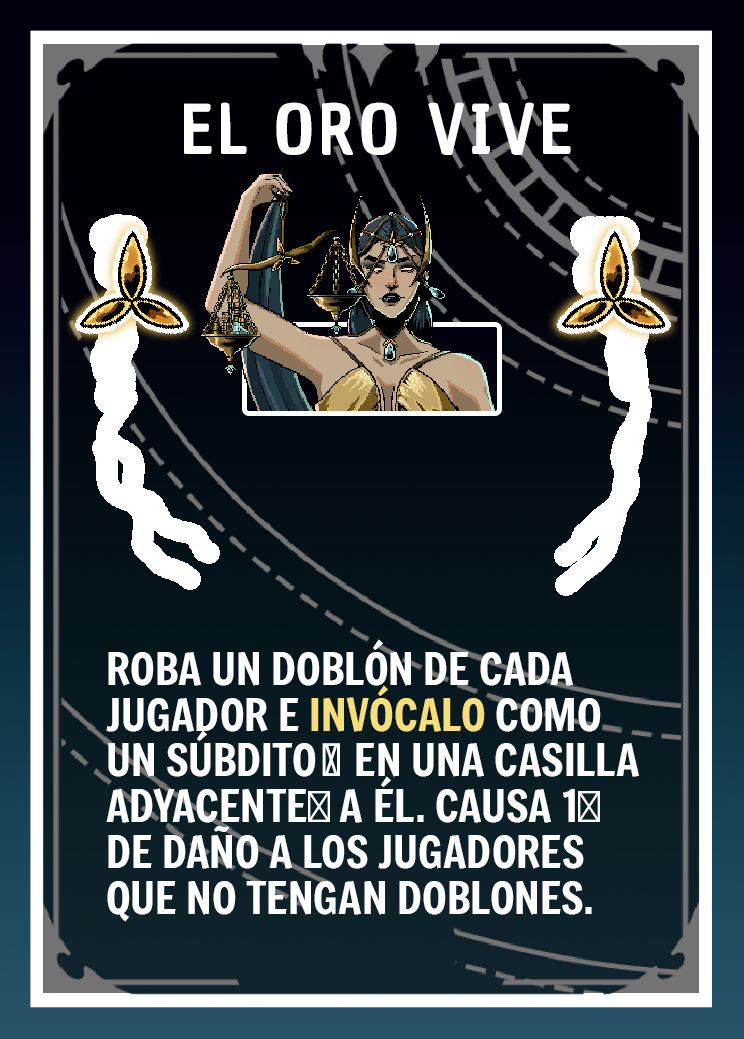
<style>
.page{position:relative;width:744px;height:1039px}
.page>*{position:absolute;margin:0}
.t1{font:66.7px "ChauPhilomeneOne-Regular";letter-spacing:0.075em;color:#ffffff}
.t2{font:43.7px/45.8px "Freeman-Regular";color:#ffffff}
.t3{font:43.7px/45.8px "Freeman-Regular";color:#f7de79}
.t4{font:43.7px/45.8px "MyriadPro-Regular";color:#ffffff}
</style>
<div class="page">
<p class="t1" style="left:184px;top:102px;width:387px;height:53px">EL ORO VIVE</p>
<p class="t2" style="left:106px;top:639px;width:533px;height:283px">ROBA UN DOBLÓN DE CADA JUGADOR E <span class="t3">INVÓCALO</span> COMO     UN SÚBDITO👾 EN UNA CASILLA ADYACENTE<span class="t4">⬆️</span> A ÉL. CAUSA 1<span class="t4">❤️</span> <br>DE DAÑO A LOS JUGADORES <br>QUE NO TENGAN DOBLONES.</p>
</div>
